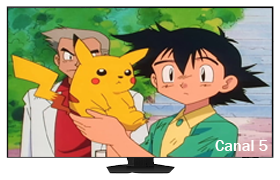
<style>
.page{position:relative;width:280px;height:180px}
.page>*{position:absolute;margin:0}
.t1{font:16.1px "FranklinGothic-Medium";color:#ffffff}
</style>
<div class="page">
<p class="t1" style="left:215px;top:140px;width:53px;height:11px">Canal 5</p>
</div>
